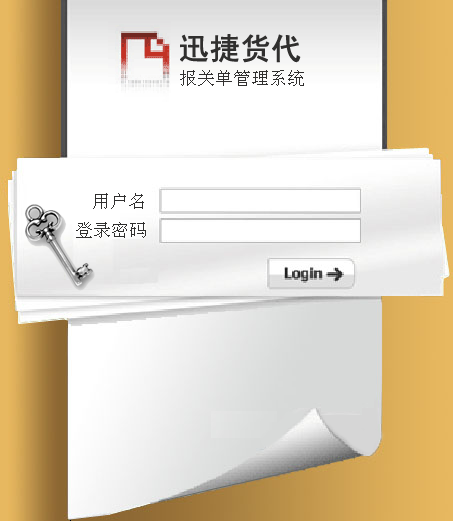
<style>
.page{position:relative;width:453px;height:521px}
.page>*{position:absolute;margin:0}
.t1{font:30px "SimHei";color:#302f2e;font-weight:bold}
.t2{font:18px "ChinaGB2312";color:#302f2e}
</style>
<div class="page">
<p class="t1" style="left:180px;top:34px;width:121px;height:29px">迅捷货代</p>
<p class="t2" style="left:180px;top:70px;width:124px;height:16px">报关单管理系统</p>
<p class="t2" style="left:93px;top:193px;width:51px;height:16px">用户名</p>
<p class="t2" style="left:76px;top:222px;width:70px;height:16px">登录密码</p>
</div>
